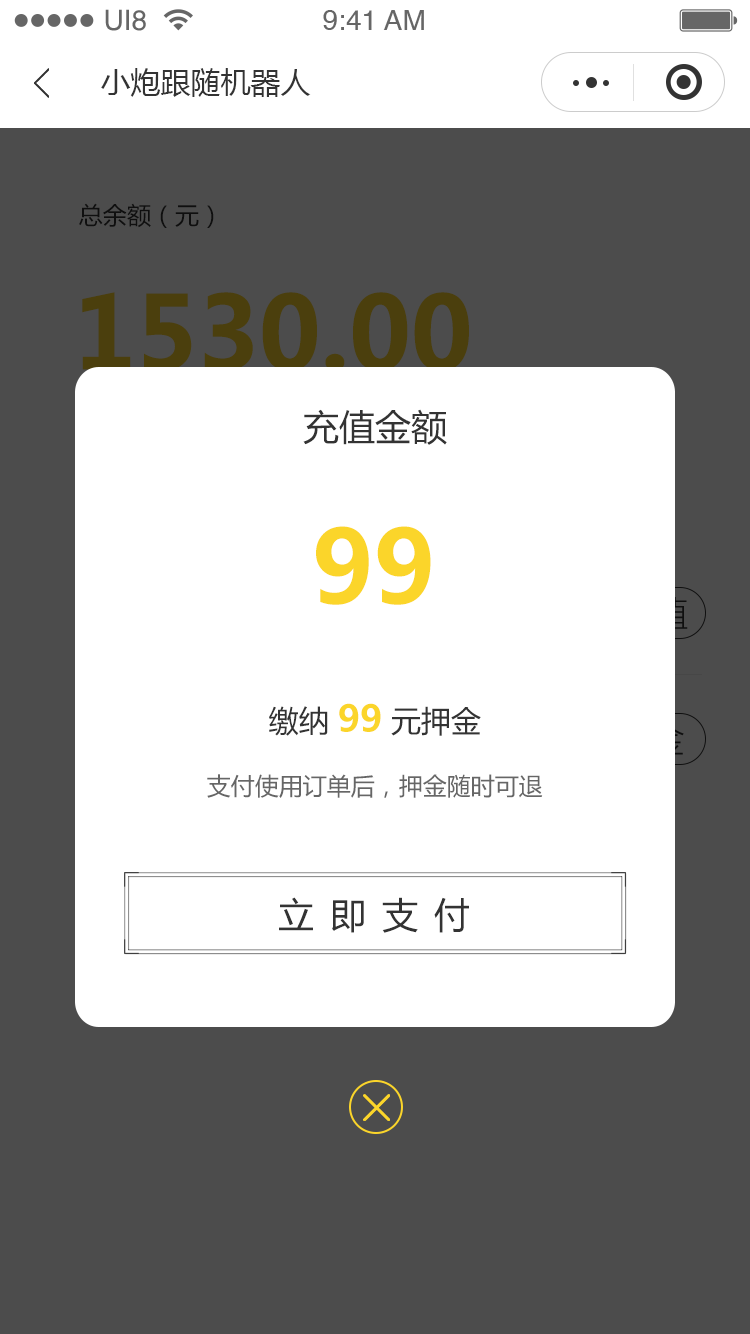
<style>
.page{position:relative;width:750px;height:1334px;background:#4c4c4c}
.page>*{position:absolute;margin:0}
.t1{font:28.1px "Helvetica";color:#666666}
.t2{font:30px "MicrosoftYaHei";color:#333333}
.t3{font:36px "MicrosoftYaHei";color:#333333}
.t4{font:100px "MicrosoftYaHei-Bold";color:#fbd52a}
.t5{font:36px "MicrosoftYaHei-Bold";color:#fbd52a}
.t6{font:24px "MicrosoftYaHei";color:#666666}
.t7{font:36px "MicrosoftYaHei";letter-spacing:0.44em;color:#333333}
</style>
<div class="page">
<p class="t1" style="left:105px;top:9px;width:41px;height:22px">UI8</p>
<p class="t1" style="left:323px;top:10px;width:101px;height:20px">9:41 AM</p>
<p class="t2" style="left:101px;top:68px;width:210px;height:29px">小炮跟随机器人</p>
<p class="t3" style="left:303px;top:409px;width:144px;height:36px">充值金额</p>
<p class="t4" style="left:316px;top:526px;width:115px;height:79px">99</p>
<p class="t2" style="left:269px;top:703px;width:212px;height:33px">缴纳 <span class="t5">99 </span>元押金</p>
<p class="t6" style="left:207px;top:774px;width:336px;height:24px">支付使用订单后，押金随时可退</p>
<p class="t7" style="left:279px;top:897px;width:190px;height:36px">立即支付</p>
</div>
